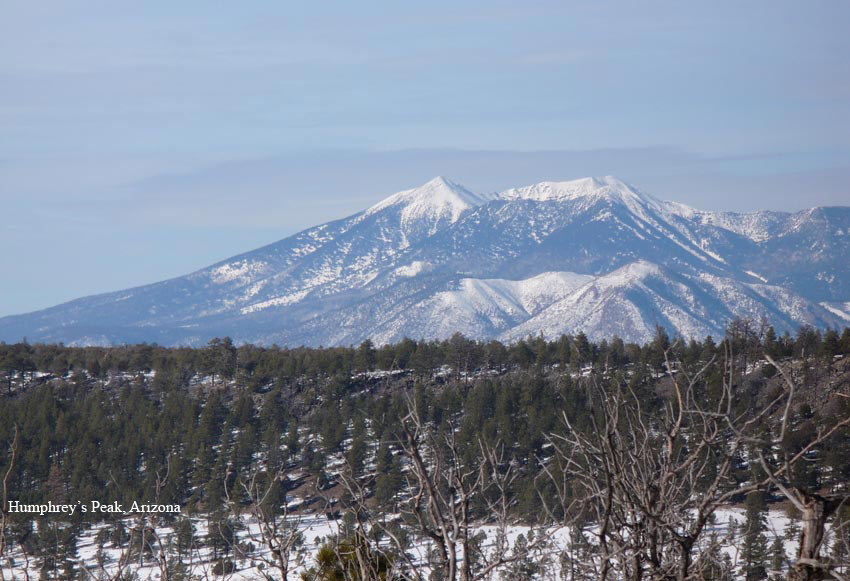
<style>
.page{position:relative;width:850px;height:581px}
.page>*{position:absolute;margin:0}
.t1{font:16px "TimesNewRomanPSMT";color:#ffffff}
</style>
<div class="page">
<p class="t1" style="left:8px;top:501px;width:173px;height:14px">Humphrey’s Peak, Arizona</p>
</div>
